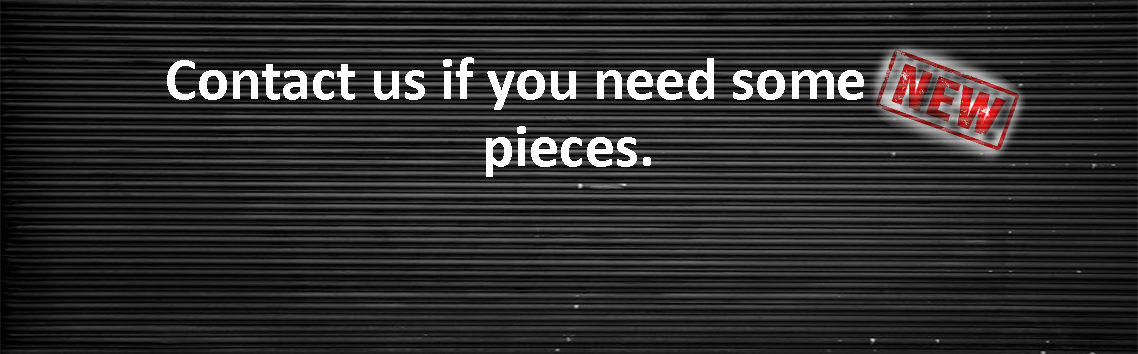
<style>
.page{position:relative;width:1138px;height:354px}
.page>*{position:absolute;margin:0}
.t1{font:60px "Calibri-Bold";color:#ffffff}
</style>
<div class="page">
<p class="t1" style="left:167px;top:57px;width:697px;height:53px">Contact us if you need some</p>
<p class="t1" style="left:486px;top:126px;width:165px;height:51px">pieces.</p>
</div>
